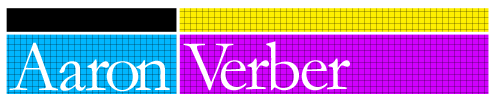
<style>
.page{position:relative;width:500px;height:100px;background:#ffffff}
.page>*{position:absolute;margin:0}
.t1{font:72px "Garamond";letter-spacing:-0.03em;color:#fefefe}
.t2{font:72px "Garamond";letter-spacing:-0.1em;color:#fefefe}
.t3{font:72px "Garamond";letter-spacing:-0.03em;color:#ffffff}
.t4{font:72px "Garamond";letter-spacing:-0.02em;color:#ffffff}
.t5{font:72px "Garamond";letter-spacing:-0.04em;color:#ffffff}
.t6{font:72px "Garamond";letter-spacing:-0.06em;color:#ffffff}
.t7{font:72px "Garamond";letter-spacing:-0.1em;color:#ffffff}
</style>
<div class="page">
<p class="t1" style="left:183px;top:41px;width:167px;height:50px"><span class="t2">V</span>erbe<span class="t2">r</span></p>
<p class="t3" style="left:9px;top:42px;width:161px;height:50px">A<span class="t4">a</span><span class="t5">r</span><span class="t6">o</span><span class="t7">n</span></p>
</div>
